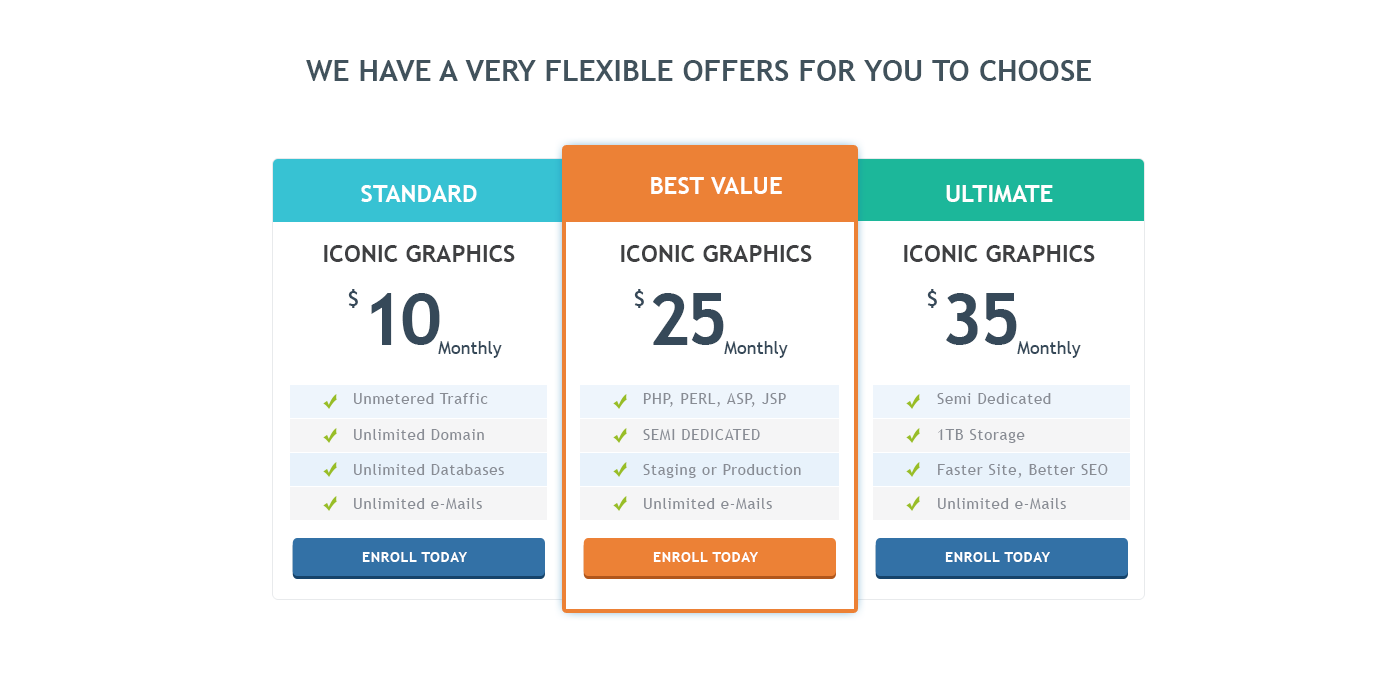
<style>
.page{position:relative;width:1400px;height:700px;background:#ffffff}
.page>*{position:absolute;margin:0}
.t1{font:30px "TrebuchetMS-Bold";color:#41525c;text-transform:uppercase}
.t2{font:24px/60px "TrebuchetMS-Bold";color:#3f4042;text-transform:uppercase}
.t3{font:24px/60px "TrebuchetMS-Bold";color:#ffffff;text-transform:uppercase}
.t4{font:24px/68px "TrebuchetMS-Bold";color:#3f4042;text-transform:uppercase}
.t5{font:24px/68px "TrebuchetMS-Bold";color:#ffffff;text-transform:uppercase}
.t6{font:36px "TrebuchetMS-Bold";letter-spacing:-0.05em;color:#364959;text-transform:uppercase}
.t7{font:72px "TrebuchetMS-Bold";letter-spacing:-0.05em;color:#364959;text-transform:uppercase}
.t8{font:18px "TrebuchetMS";color:#364959}
.t9{font:15px "TrebuchetMS";letter-spacing:0.05em;color:#888c94}
.t10{font:14px "TrebuchetMS-Bold";letter-spacing:0.05em;color:#ffffff;text-transform:uppercase}
</style>
<div class="page">
<p class="t1" style="left:306px;top:60px;width:785px;height:21px">We have a very flexible offers for you to choose</p>
<p class="t2" style="left:324px;top:185px;width:191px;height:77px;text-align:center"><span class="t3">Standard<br></span>iconic graphics</p>
<p class="t4" style="left:621px;top:177px;width:191px;height:85px;text-align:center"><span class="t5">Best Value<br></span>Iconic Graphics</p>
<p class="t2" style="left:904px;top:185px;width:191px;height:77px;text-align:center"><span class="t3">Ultimate<br></span>iconic graphics</p>
<p class="t6" style="left:348px;top:289px;width:10px;height:19px">$</p>
<p class="t7" style="left:371px;top:293px;width:69px;height:52px">10</p>
<p class="t6" style="left:634px;top:289px;width:10px;height:19px">$</p>
<p class="t7" style="left:653px;top:293px;width:71px;height:52px">25</p>
<p class="t6" style="left:927px;top:289px;width:10px;height:19px">$</p>
<p class="t7" style="left:946px;top:293px;width:71px;height:52px">35</p>
<p class="t8" style="left:438px;top:341px;width:64px;height:17px">Monthly</p>
<p class="t8" style="left:724px;top:341px;width:64px;height:17px">Monthly</p>
<p class="t8" style="left:1017px;top:341px;width:64px;height:17px">Monthly</p>
<p class="t9" style="left:354px;top:393px;width:134px;height:11px">Unmetered Traffic</p>
<p class="t9" style="left:643px;top:393px;width:143px;height:14px">PHP, PERL, ASP, JSP</p>
<p class="t9" style="left:937px;top:393px;width:114px;height:11px">Semi Dedicated</p>
<p class="t9" style="left:354px;top:429px;width:130px;height:11px">Unlimited Domain</p>
<p class="t9" style="left:643px;top:429px;width:117px;height:11px">SEMI DEDICATED</p>
<p class="t9" style="left:938px;top:429px;width:87px;height:14px">1TB Storage</p>
<p class="t9" style="left:354px;top:464px;width:150px;height:11px">Unlimited Databases</p>
<p class="t9" style="left:643px;top:464px;width:158px;height:14px">Staging or Production</p>
<p class="t9" style="left:938px;top:464px;width:170px;height:14px">Faster Site, Better SEO</p>
<p class="t9" style="left:354px;top:498px;width:128px;height:11px">Unlimited e-Mails</p>
<p class="t9" style="left:644px;top:498px;width:128px;height:11px">Unlimited e-Mails</p>
<p class="t9" style="left:938px;top:498px;width:128px;height:11px">Unlimited e-Mails</p>
<p class="t10" style="left:362px;top:552px;width:105px;height:10px">Enroll Today</p>
<p class="t10" style="left:653px;top:552px;width:105px;height:10px">Enroll Today</p>
<p class="t10" style="left:945px;top:552px;width:105px;height:10px">Enroll Today</p>
</div>
